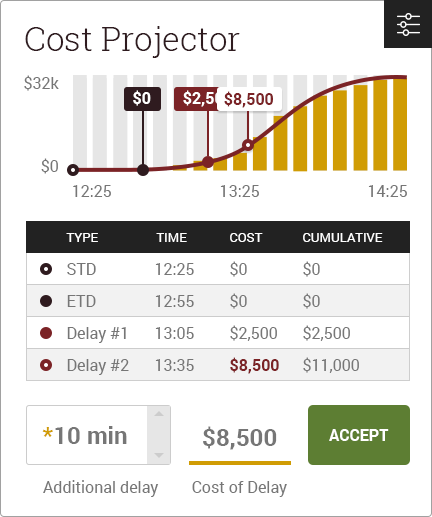
<style>
.page{position:relative;width:432px;height:517px;background:#ffffff}
.page>*{position:absolute;margin:0}
.t1{font:33px "RobotoSlab-Light";color:#2f1b1f}
.t2{font:16px "Roboto-Regular";color:#767676}
.t3{font:16px "Roboto-Bold";color:#ffffff}
.t4{font:16px "Roboto-Bold";color:#7b2326}
.t5{font:13px "Roboto-Regular";color:#ffffff;text-transform:uppercase}
.t6{font:24px "Roboto-Bold";color:#767676}
.t7{font:24px "Roboto-Bold";color:#d09c04}
.t8{font:16px "Roboto-Bold";color:#ffffff;text-transform:uppercase}
</style>
<div class="page">
<p class="t1" style="left:25px;top:26px;width:215px;height:32px">Cost Projector</p>
<p class="t2" style="left:24px;top:75px;width:35px;height:16px">$32k</p>
<p class="t3" style="left:133px;top:90px;width:18px;height:16px">$0</p>
<p class="t3" style="left:183px;top:90px;width:49px;height:17px">$2,500</p>
<p class="t4" style="left:224px;top:91px;width:49px;height:17px">$8,500</p>
<p class="t2" style="left:41px;top:158px;width:17px;height:16px">$0</p>
<p class="t2" style="left:73px;top:185px;width:38px;height:12px">12:25</p>
<p class="t2" style="left:220px;top:185px;width:39px;height:12px">13:25</p>
<p class="t2" style="left:368px;top:185px;width:39px;height:12px">14:25</p>
<p class="t5" style="left:66px;top:233px;width:32px;height:9px">Type</p>
<p class="t5" style="left:156px;top:233px;width:31px;height:9px">Time</p>
<p class="t5" style="left:230px;top:233px;width:33px;height:9px">Cost</p>
<p class="t5" style="left:303px;top:233px;width:80px;height:9px">Cumulative</p>
<p class="t2" style="left:67px;top:263px;width:29px;height:12px">STD</p>
<p class="t2" style="left:155px;top:263px;width:39px;height:12px">12:25</p>
<p class="t2" style="left:230px;top:261px;width:17px;height:16px">$0</p>
<p class="t2" style="left:303px;top:261px;width:17px;height:16px">$0</p>
<p class="t2" style="left:230px;top:293px;width:17px;height:16px">$0</p>
<p class="t2" style="left:303px;top:293px;width:17px;height:16px">$0</p>
<p class="t2" style="left:67px;top:295px;width:29px;height:12px">ETD</p>
<p class="t2" style="left:155px;top:295px;width:39px;height:12px">12:55</p>
<p class="t2" style="left:67px;top:327px;width:59px;height:16px">Delay #1</p>
<p class="t2" style="left:155px;top:327px;width:39px;height:12px">13:05</p>
<p class="t2" style="left:230px;top:325px;width:47px;height:16px">$2,500</p>
<p class="t2" style="left:303px;top:325px;width:47px;height:16px">$2,500</p>
<p class="t2" style="left:67px;top:359px;width:62px;height:16px">Delay #2</p>
<p class="t2" style="left:155px;top:359px;width:39px;height:12px">13:35</p>
<p class="t4" style="left:230px;top:357px;width:49px;height:17px">$8,500</p>
<p class="t2" style="left:303px;top:357px;width:56px;height:16px">$11,000</p>
<p class="t6" style="left:42px;top:426px;width:85px;height:18px"><span class="t7">*</span>10 min</p>
<p class="t6" style="left:203px;top:426px;width:74px;height:24px">$8,500</p>
<p class="t8" style="left:329px;top:429px;width:60px;height:12px">Accept</p>
<p class="t2" style="left:43px;top:480px;width:116px;height:17px">Additional delay</p>
<p class="t2" style="left:192px;top:481px;width:95px;height:16px">Cost of Delay</p>
</div>
